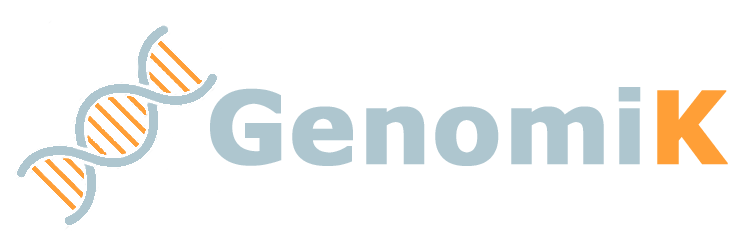
<style>
.page{position:relative;width:747px;height:252px;background:#ffffff}
.page>*{position:absolute;margin:0}
.t1{font:100px "Verdana-Bold";color:#aec6cf;font-weight:bold}
.t2{font:100px "Verdana-Bold";color:#ff9f37;font-weight:bold}
</style>
<div class="page">
<p class="t1" style="left:210px;top:87px;width:518px;height:79px">Genomi<span class="t2">K</span></p>
</div>
